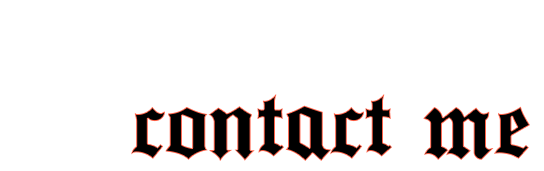
<style>
.page{position:relative;width:544px;height:171px;background:#ffffff}
.page>*{position:absolute;margin:0}
.t1{font:111px "Ancient-Medium";color:#000000}
</style>
<div class="page">
<p class="t1" style="left:131px;top:94px;width:399px;height:67px">contact me</p>
</div>
